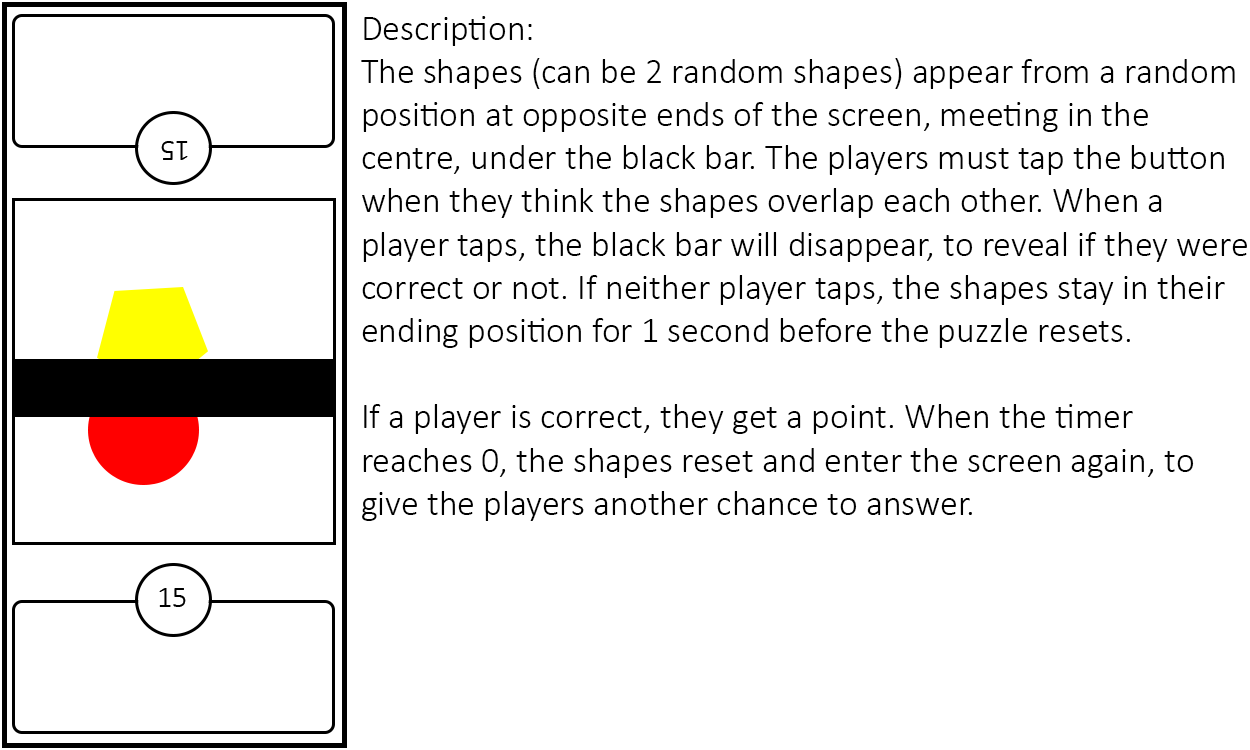
<style>
.page{position:relative;width:1250px;height:750px;background:#ffffff}
.page>*{position:absolute;margin:0}
.t1{font:36px "Calibri-Light";color:#000000}
</style>
<div class="page">
<p class="t1" style="left:361px;top:16px;width:886px;height:505px">Description:<br>The shapes (can be 2 random shapes) appear from a random <br>position at opposite ends of the screen, meeting in the <br>centre, under the black bar. The players must tap the button <br>when they think the shapes overlap each other. When a <br>player taps, the black bar will disappear, to reveal if they were<br>correct or not. If neither player taps, the shapes stay in their <br>ending position for 1 second before the puzzle resets.<br><br>If a player is correct, they get a point. When the timer <br>reaches 0, the shapes reset and enter the screen again, to <br>give the players another chance to answer.</p>
</div>
